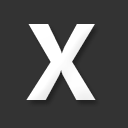
<style>
.page{position:relative;width:128px;height:128px;background:#333333}
.page>*{position:absolute;margin:0}
.t1{font:100px "MicrosoftYaHei-Bold";color:#ffffff}
</style>
<div class="page">
<p class="t1" style="left:26px;top:24px;width:70px;height:76px">X</p>
</div>
